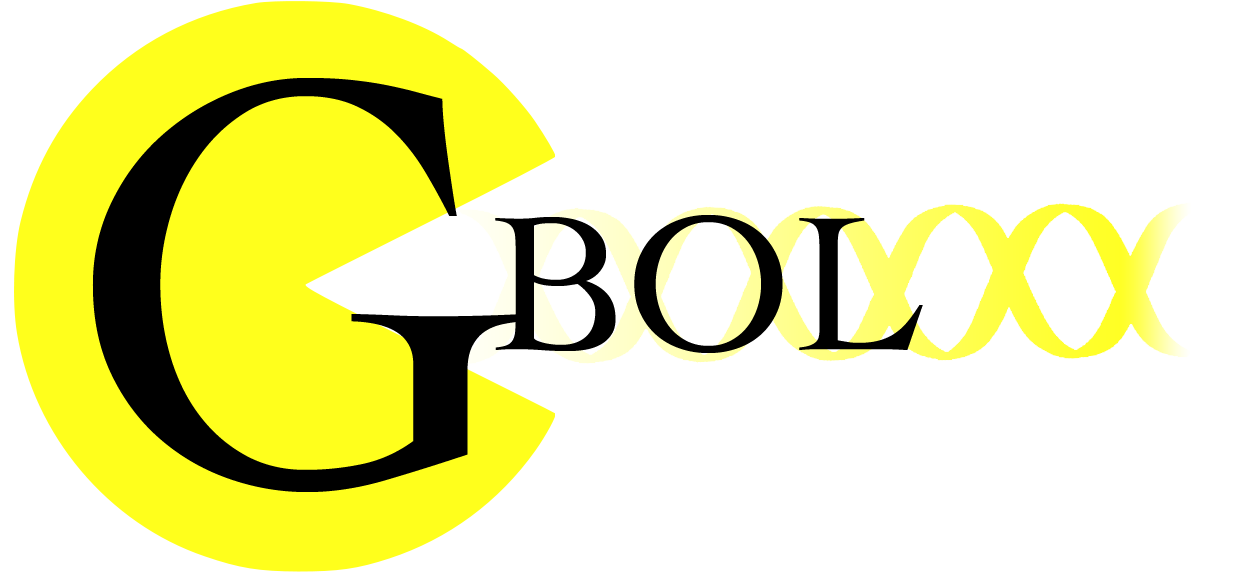
<style>
.page{position:relative;width:1244px;height:576px;background:#ffffff}
.page>*{position:absolute;margin:0}
.t1{font:600px "Cochin";color:#000000}
.t2{font:200px "Cochin";color:#000000}
</style>
<div class="page">
<p class="t1" style="left:92px;top:78px;width:434px;height:414px">G</p>
<p class="t2" style="left:495px;top:215px;width:428px;height:138px">BOL</p>
</div>
